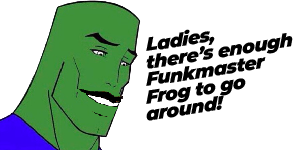
<style>
.page{position:relative;width:300px;height:150px;background:#ffffff}
.page>*{position:absolute;margin:0}
.t1{font:18.7px/17.4px "Montserrat-BlackItalic";letter-spacing:-0.03em;color:#000000}
</style>
<div class="page">
<p class="t1" style="left:146px;top:29px;width:147px;height:92px;rotate:-9deg">Ladies, <br>there’s enough<br>Funkmaster <br>Frog to go <br>around!</p>
</div>
